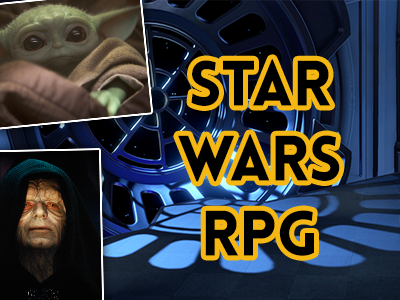
<style>
.page{position:relative;width:400px;height:300px}
.page>*{position:absolute;margin:0}
.t1{font:62.5px/75px "Lovelo-Black";color:#000000;text-transform:uppercase}
</style>
<div class="page">
<p class="t1" style="left:178px;top:59px;width:162px;height:197px;text-align:center">Star Wars RPG</p>
</div>
